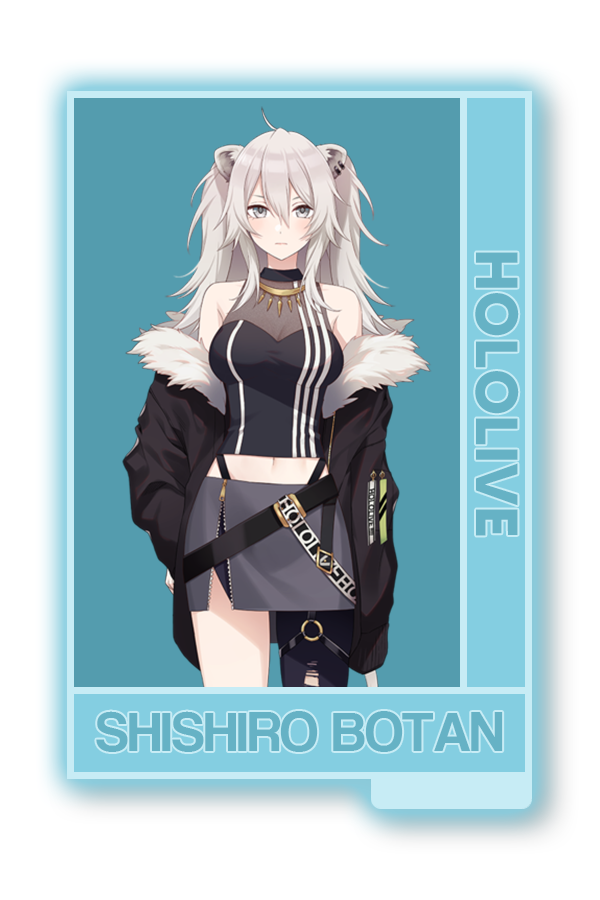
<style>
.page{position:relative;width:600px;height:900px;background:#ffffff}
.page>*{position:absolute;margin:0}
.t1{font:59.2px "MADETOMMY-Bold";color:#66b2c5}
.t2{font:56.6px "CoolveticaRg-Regular";color:#66b2c5}
</style>
<div class="page">
<p class="t1" style="left:475px;top:252px;width:44px;height:284px;rotate:90deg">HOLOLIVE</p>
<p class="t2" style="left:96px;top:711px;width:407px;height:41px">SHISHIRO BOTAN</p>
</div>
